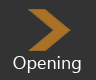
<style>
.page{position:relative;width:96px;height:80px;background:#333333}
.page>*{position:absolute;margin:0}
.t1{font:18px "SegoeUI";color:#fdfcfc}
</style>
<div class="page">
<p class="t1" style="left:13px;top:56px;width:68px;height:17px">Opening</p>
</div>
